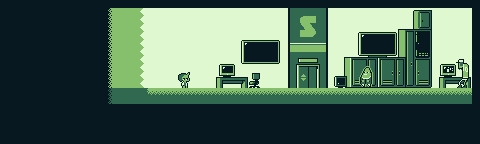
<style>
.page{position:relative;width:480px;height:144px;background:#071821}
.page>*{position:absolute;margin:0}
.t1{font:33px "PolenoBold";color:#86c06c;text-transform:uppercase}
</style>
<div class="page">
<p class="t1" style="left:300px;top:16px;width:16px;height:21px">s</p>
</div>
